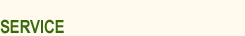
<style>
.page{position:relative;width:245px;height:36px;background:#fff9ee}
.page>*{position:absolute;margin:0}
.t1{font:18px "ArialNarrow-Bold";color:#386a0b}
</style>
<div class="page">
<p class="t1" style="left:0px;top:19px;width:64px;height:15px">SERVICE</p>
</div>
